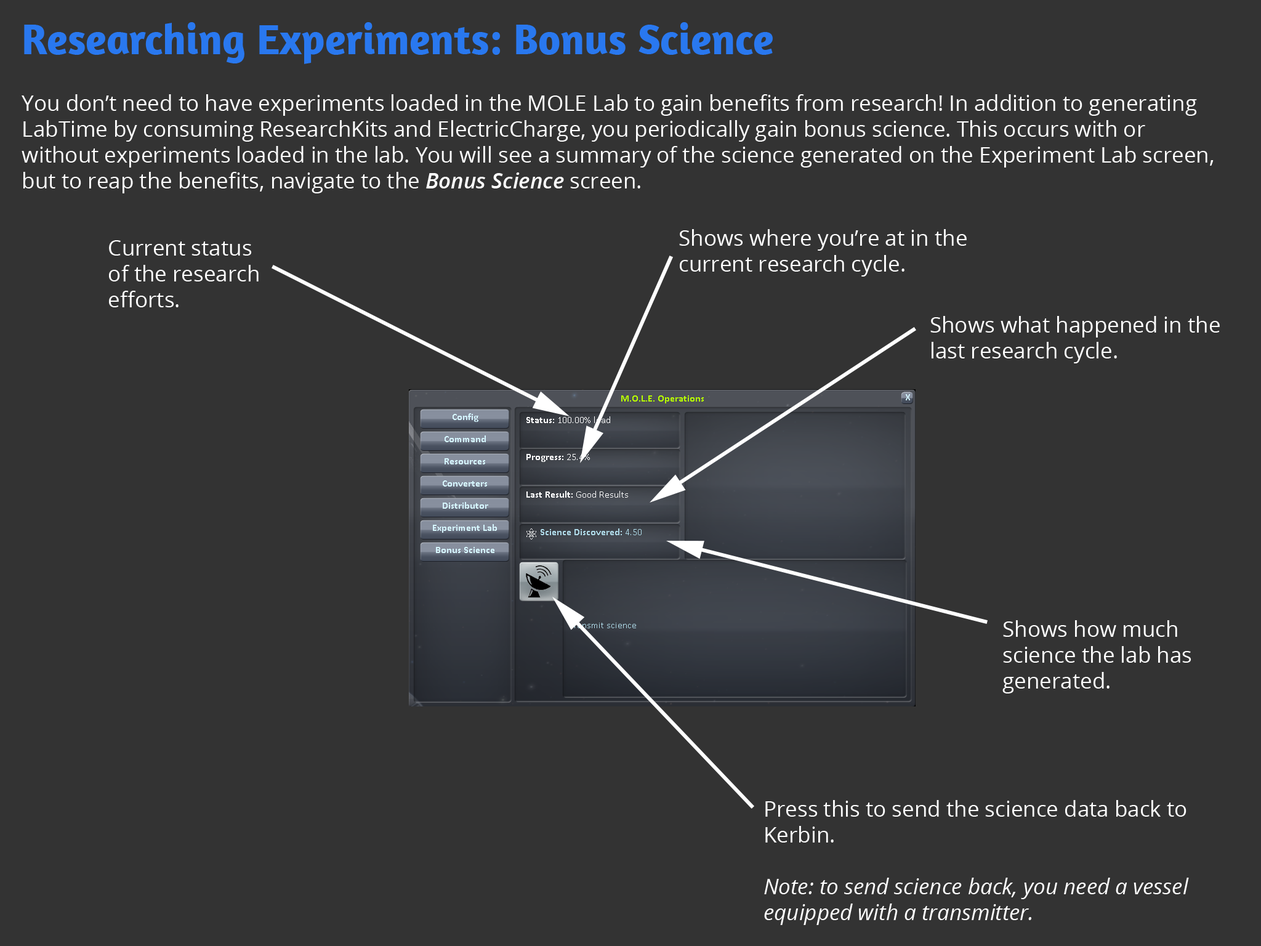
<style>
.page{position:relative;width:1261px;height:946px;background:#333333}
.page>*{position:absolute;margin:0}
.t1{font:43.1px "Amaranth-Bold";color:#2978ef}
.t2{font:21.5px "OpenSans";color:#ffffff}
.t3{font:21.5px "OpenSans-SemiboldItalic";color:#ffffff}
.t4{font:21.5px "OpenSans-Italic";color:#ffffff}
</style>
<div class="page">
<p class="t1" style="left:24px;top:22px;width:749px;height:42px">Researching Experiments: Bonus Science</p>
<p class="t2" style="left:22px;top:94px;width:1192px;height:99px">You don’t need to have experiments loaded in the MOLE Lab to gain benefits from research! In addition to generating LabTime by consuming ResearchKits and ElectricCharge, you periodically gain bonus science. This occurs with or without experiments loaded in the lab. You will see a summary of the science generated on the Experiment Lab screen, but to reap the benefits, navigate to the <span class="t3">Bonus Science </span>screen.</p>
<p class="t2" style="left:679px;top:229px;width:288px;height:47px">Shows where you’re at in the<br>current research cycle.</p>
<p class="t2" style="left:109px;top:240px;width:150px;height:67px">Current status<br>of the research<br>efforts.</p>
<p class="t2" style="left:930px;top:316px;width:290px;height:47px">Shows what happened in the<br>last research cycle.</p>
<p class="t2" style="left:1002px;top:620px;width:189px;height:73px">Shows how much<br>science the lab has<br>generated.</p>
<p class="t4" style="left:764px;top:800px;width:425px;height:125px"><span class="t2">Press this to send the science data back to<br>Kerbin.<br><br></span>Note: to send science back, you need a vessel<br>equipped with a transmitter.</p>
</div>
